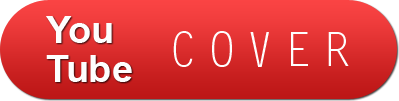
<style>
.page{position:relative;width:399px;height:101px}
.page>*{position:absolute;margin:0}
.t1{font:38px/39px "Arial-BoldMT";color:#fefefe}
.t2{font:47px "LetterGothicStd";letter-spacing:0.26em;color:#fefefe}
</style>
<div class="page">
<p class="t1" style="left:46px;top:16px;width:86px;height:66px">You<br>Tube</p>
<p class="t2" style="left:173px;top:31px;width:176px;height:36px">COVER</p>
</div>
